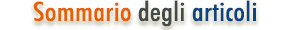
<style>
.page{position:relative;width:300px;height:30px;background:#ffffff}
.page>*{position:absolute;margin:0}
.t1{font:27px "FuturaBT-MediumCondensed";letter-spacing:0.01em;color:#e95f03;scale:1.11 1}
.t2{font:27px "FuturaBT-MediumCondensed";letter-spacing:0.01em;color:#44494c;scale:1.11 1}
.t3{font:27px "FuturaBT-MediumCondensed";letter-spacing:0.01em;color:#0c4481;scale:1.11 1}
</style>
<div class="page">
<p class="t1" style="left:33px;top:0px;width:224px;height:27px">Sommario <span class="t2">degli </span><span class="t3">articoli</span></p>
</div>
